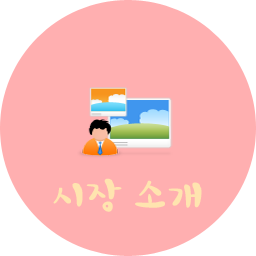
<style>
.page{position:relative;width:256px;height:256px;background:#ffafb0}
.page>*{position:absolute;margin:0}
.t1{font:36px "HoonWhayangR";color:#ffe4af;scale:1.1 1}
</style>
<div class="page">
<p class="t1" style="left:53px;top:178px;width:149px;height:34px">시장 소개</p>
</div>
